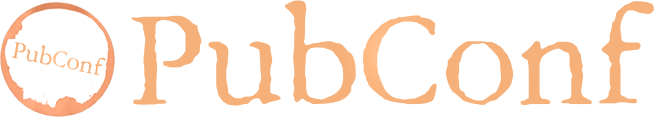
<style>
.page{position:relative;width:654px;height:117px;background:#ffffff}
.page>*{position:absolute;margin:0}
.t1{font:126.4px "Aquifer";color:#f6b17b}
.t2{font:22.4px "Aquifer";color:#f6b17b}
</style>
<div class="page">
<p class="t1" style="left:131px;top:0px;width:523px;height:106px">PubConf</p>
<p class="t2" style="left:12px;top:42px;width:94px;height:34px;rotate:11deg">PubConf</p>
</div>
